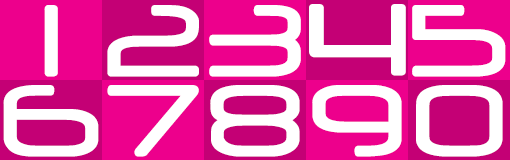
<style>
.page{position:relative;width:510px;height:160px;background:#ed008c}
.page>*{position:absolute;margin:0}
.t1{font:120px "Neuropol";letter-spacing:0.025em;color:#ffffff}
</style>
<div class="page">
<p class="t1" style="left:44px;top:5px;width:14px;height:72px">1</p>
<p class="t1" style="left:107px;top:5px;width:92px;height:72px">2</p>
<p class="t1" style="left:209px;top:5px;width:92px;height:72px">3</p>
<p class="t1" style="left:309px;top:4px;width:97px;height:72px">4</p>
<p class="t1" style="left:412px;top:5px;width:94px;height:72px">5</p>
<p class="t1" style="left:3px;top:85px;width:96px;height:72px">6</p>
<p class="t1" style="left:107px;top:85px;width:92px;height:72px">7</p>
<p class="t1" style="left:210px;top:85px;width:90px;height:72px">8</p>
<p class="t1" style="left:312px;top:85px;width:90px;height:72px">9</p>
<p class="t1" style="left:416px;top:85px;width:87px;height:72px">0</p>
</div>
